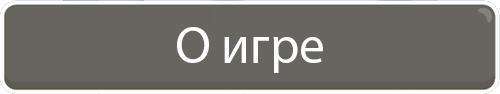
<style>
.page{position:relative;width:500px;height:94px;background:#66655f}
.page>*{position:absolute;margin:0}
.t1{font:52px "MyriadPro-Regular";color:#fdfdfd}
</style>
<div class="page">
<p class="t1" style="left:177px;top:27px;width:146px;height:46px">О игре</p>
</div>
